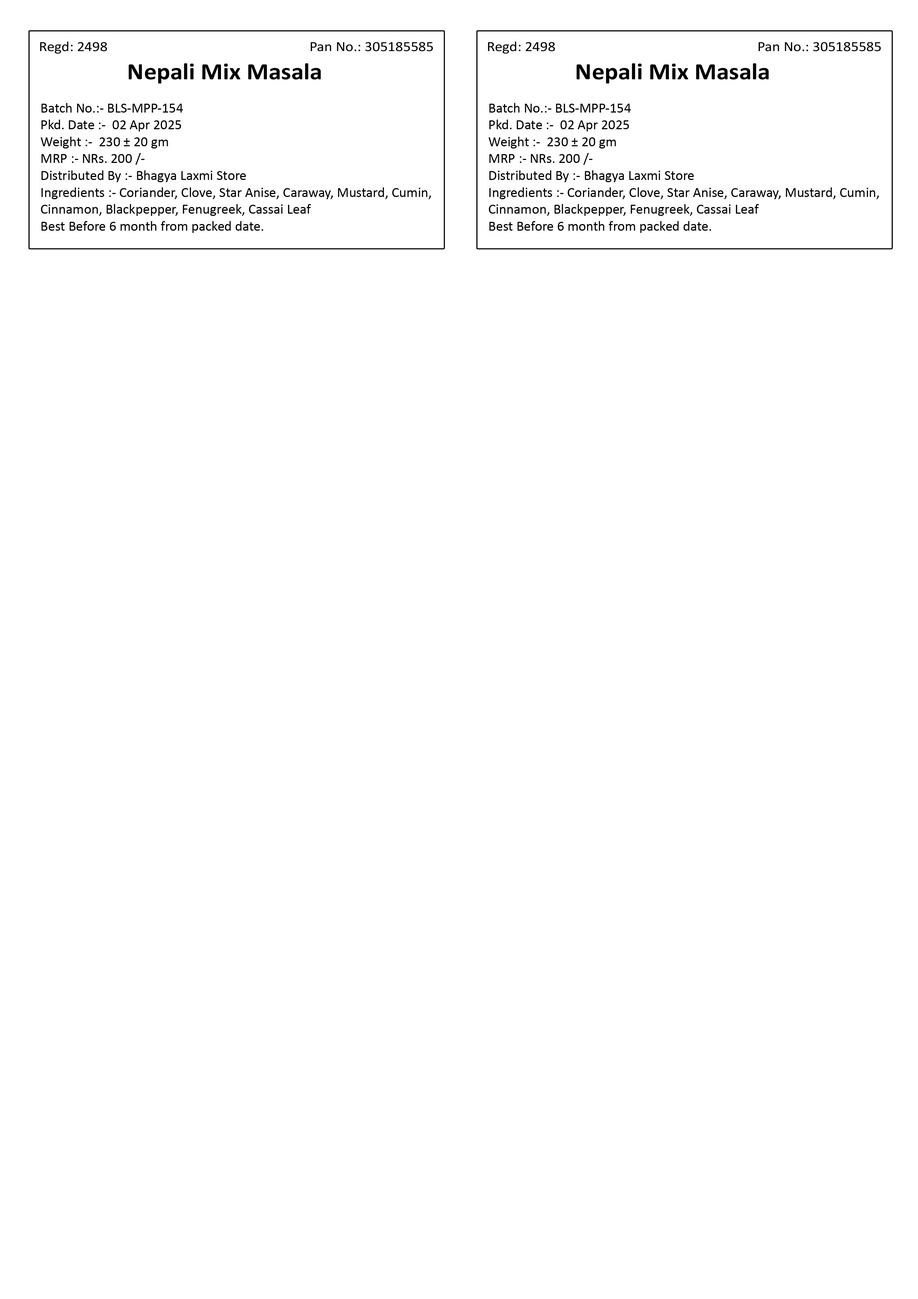
<style>
.page{position:relative;width:918px;height:1299px;background:#ffffff}
.page>*{position:absolute;margin:0}
.t1{font:14.1px "Calibri";color:#000000;scale:1.08 1}
.t2{font:23.5px "Calibri-Bold";color:#000000;scale:1.08 1}
.t3{font:14.1px "Calibri";color:#000000}
</style>
<div class="page">
<p class="t1" style="left:40px;top:41px;width:393px;height:13px">Regd: 2498                                                           Pan No.: 305185585</p>
<p class="t1" style="left:488px;top:41px;width:393px;height:13px">Regd: 2498                                                           Pan No.: 305185585</p>
<p class="t2" style="left:128px;top:63px;width:193px;height:21px">Nepali Mix Masala</p>
<p class="t2" style="left:576px;top:63px;width:193px;height:21px">Nepali Mix Masala</p>
<p class="t3" style="left:41px;top:103px;width:390px;height:130px">Batch No.:- BLS-MPP-154<br>Pkd. Date :-  02 Apr 2025<br>Weight :-  230 ± 20 gm<br>MRP :- NRs. 200 /-<br>Distributed By :- Bhagya Laxmi Store<br>Ingredients :- Coriander, Clove, Star Anise, Caraway, Mustard, Cumin, Cinnamon, Blackpepper, Fenugreek, Cassai Leaf<br>Best Before 6 month from packed date.</p>
<p class="t3" style="left:489px;top:103px;width:390px;height:130px">Batch No.:- BLS-MPP-154<br>Pkd. Date :-  02 Apr 2025<br>Weight :-  230 ± 20 gm<br>MRP :- NRs. 200 /-<br>Distributed By :- Bhagya Laxmi Store<br>Ingredients :- Coriander, Clove, Star Anise, Caraway, Mustard, Cumin, Cinnamon, Blackpepper, Fenugreek, Cassai Leaf<br>Best Before 6 month from packed date.</p>
</div>
